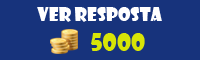
<style>
.page{position:relative;width:200px;height:60px;background:#17337c}
.page>*{position:absolute;margin:0}
.t1{font:18px "ShowcardGothic-Reg";color:#ffffff}
.t2{font:24px "ShowcardGothic-Reg";color:#d8e506}
</style>
<div class="page">
<p class="t1" style="left:37px;top:7px;width:125px;height:15px">Ver resposta</p>
<p class="t2" style="left:91px;top:33px;width:54px;height:18px">5000</p>
</div>
